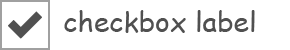
<style>
.page{position:relative;width:290px;height:50px;background:#ffffff}
.page>*{position:absolute;margin:0}
.t1{font:34px "SSStandard";color:#505050}
.t2{font:28px "ComicSansMS";color:#505050}
</style>
<div class="page">
<p class="t1" style="left:8px;top:11px;width:34px;height:28px">check</p>
<p class="t2" style="left:64px;top:10px;width:191px;height:23px">checkbox label</p>
</div>
